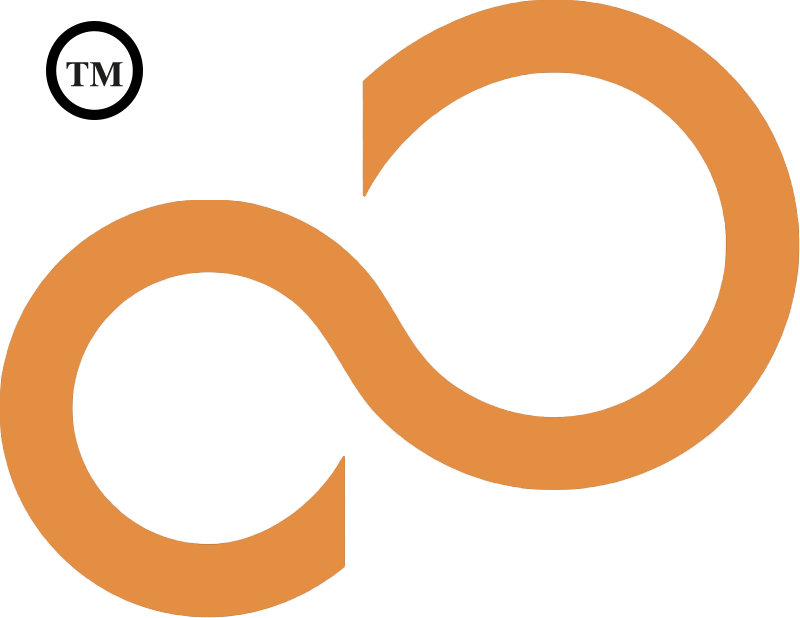
<style>
.page{position:relative;width:800px;height:618px;background:#ffffff}
.page>*{position:absolute;margin:0}
.t1{font:36px "TimesNewRomanPS-BoldMT";color:#201e1c}
.t2{font:30px "Righteous-Regular";color:#e38e42}
</style>
<div class="page">
<p class="t1" style="left:66px;top:62px;width:57px;height:25px"><span class="t2">  <br></span>TM</p>
</div>
